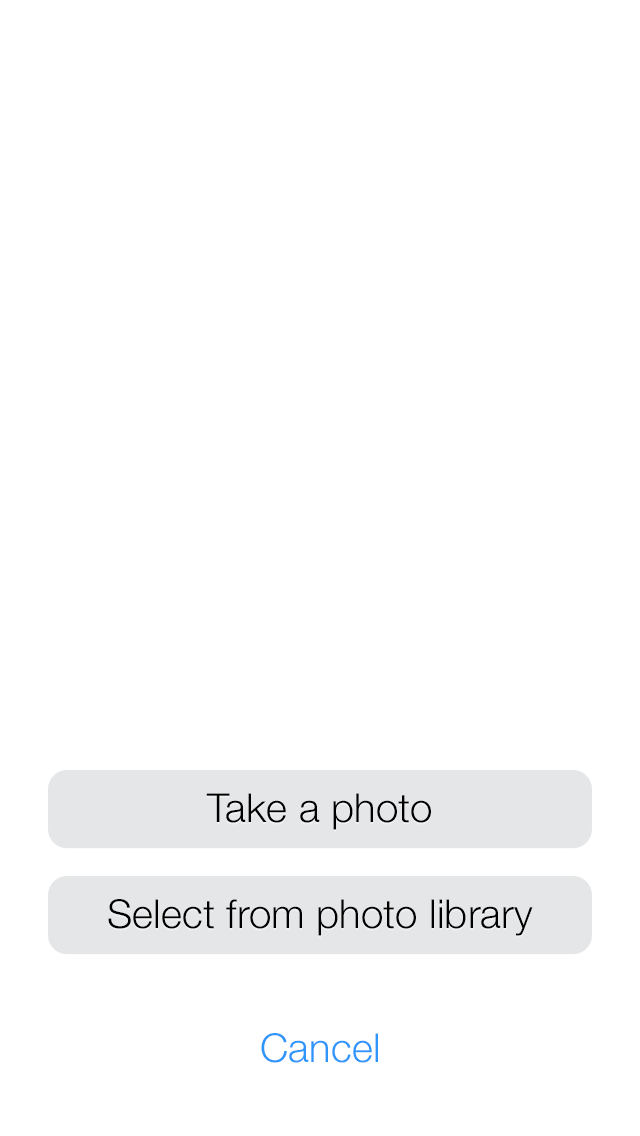
<style>
.page{position:relative;width:640px;height:1136px;background:#ffffff}
.page>*{position:absolute;margin:0}
.t1{font:40px "HelveticaNeue-Light";letter-spacing:0.005em;color:#000000}
.t2{font:40px "HelveticaNeue-Light";letter-spacing:0.005em;color:#2e95fa}
</style>
<div class="page">
<p class="t1" style="left:206px;top:793px;width:225px;height:37px">Take a photo</p>
<p class="t1" style="left:108px;top:899px;width:425px;height:37px">Select from photo library</p>
<p class="t2" style="left:261px;top:1033px;width:117px;height:30px">Cancel</p>
</div>
